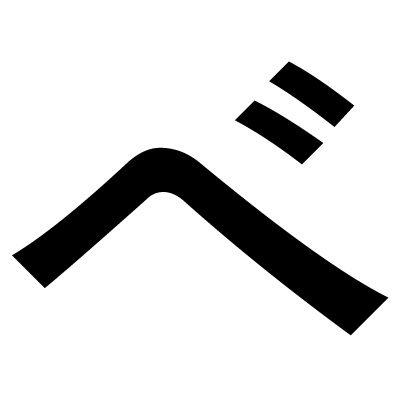
<style>
.page{position:relative;width:400px;height:400px;background:#ffffff}
.page>*{position:absolute;margin:0}
.t1{font:416.7px "MS-PGothic";color:#000000}
</style>
<div class="page">
<p class="t1" style="left:12px;top:61px;width:377px;height:275px">べ</p>
</div>
